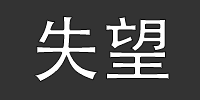
<style>
.page{position:relative;width:200px;height:100px;background:#333333}
.page>*{position:absolute;margin:0}
.t1{font:72px "AdobeHeitiStd-Regular";color:#ffffff}
</style>
<div class="page">
<p class="t1" style="left:34px;top:16px;width:135px;height:66px">失望</p>
</div>
